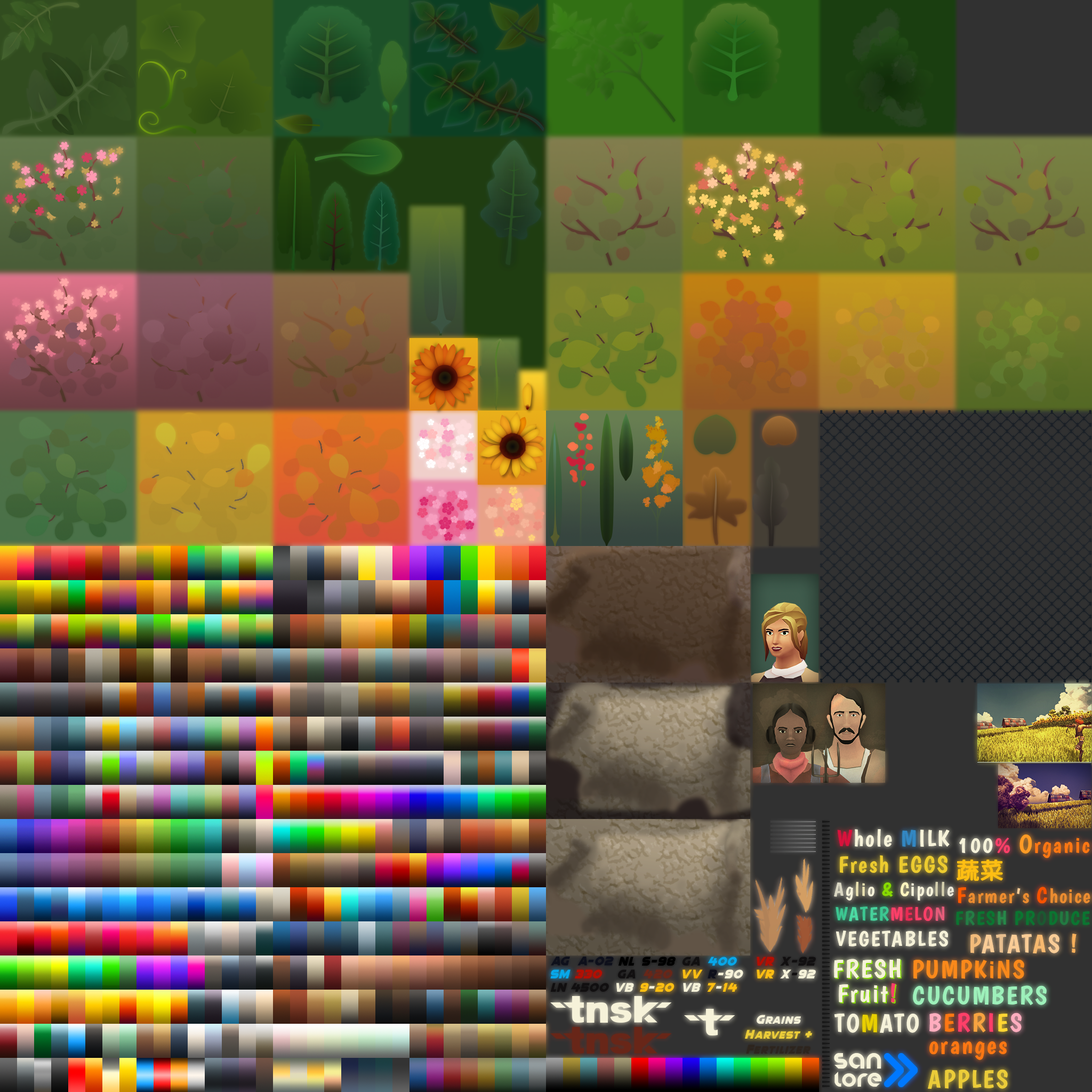
<style>
.page{position:relative;width:1092px;height:1092px}
.page>*{position:absolute;margin:0}
.t1{font:23.5px "Boogaloo-Regular";letter-spacing:0.075em;color:#f6f2d9}
.t2{font:23.5px "Boogaloo-Regular";letter-spacing:0.075em;color:#d9123c}
.t3{font:23.5px "Boogaloo-Regular";letter-spacing:0.075em;color:#3387c2}
.t4{font:22.4px "Boogaloo-Regular";letter-spacing:0.075em;color:#fe7713}
.t5{font:22.4px "Boogaloo-Regular";letter-spacing:0.075em;color:#f6f2d9}
.t6{font:22.4px "Boogaloo-Regular";letter-spacing:0.075em;color:#ff3f68}
.t7{font:25.6px "Boogaloo-Regular";letter-spacing:0.075em;color:#ff9b25}
.t8{font:23.5px "Boogaloo-Regular";letter-spacing:0.075em;color:#eccb2f}
.t9{font:22.4px "KozGoPr6N-Regular";letter-spacing:0.075em;color:#febe13}
.t10{font:19.2px "Boogaloo-Regular";letter-spacing:0.075em;color:#f6f2d9}
.t11{font:19.2px "Boogaloo-Regular";letter-spacing:0.075em;color:#d9d6c2}
.t12{font:19.2px "Boogaloo-Regular";letter-spacing:0.075em;color:#e9e1b1}
.t13{font:19.2px "Boogaloo-Regular";letter-spacing:0.075em;color:#87db00}
.t14{font:19.2px "Boogaloo-Regular";letter-spacing:0.075em;color:#fef5bf}
.t15{font:19.2px "Boogaloo-Regular";letter-spacing:0.075em;color:#d4cfae}
.t16{font:19.2px "Boogaloo-Regular";letter-spacing:0.075em;color:#ece9d8}
.t17{font:20.3px "Boogaloo-Regular";letter-spacing:0.075em;color:#eb8c30}
.t18{font:22.4px "Boogaloo-Regular";letter-spacing:0.075em;color:#ff5a00}
.t19{font:20.3px "Boogaloo-Regular";letter-spacing:0.075em;color:#f9cc96}
.t20{font:22.4px "Boogaloo-Regular";letter-spacing:0.075em;color:#f85201}
.t21{font:19.2px "Boogaloo-Regular";letter-spacing:0.075em;color:#ff3f68}
.t22{font:19.2px "Boogaloo-Regular";letter-spacing:0.075em;color:#3cc791}
.t23{font:19.2px "Boogaloo-Regular";letter-spacing:0.075em;color:#4cdaa3}
.t24{font:19.2px "Boogaloo-Regular";letter-spacing:0.075em;color:#46d19b}
.t25{font:19.2px "Boogaloo-Regular";letter-spacing:0.075em;color:#e82b53}
.t26{font:19.2px "Boogaloo-Regular";letter-spacing:0.075em;color:#e55c7a}
.t27{font:19.2px "Boogaloo-Regular";letter-spacing:0.075em;color:#0b7531}
.t28{font:19.2px "Boogaloo-Regular";letter-spacing:0.075em;color:#247d44}
.t29{font:19.2px "Boogaloo-Regular";letter-spacing:0.075em;color:#278849}
.t30{font:19.2px "Boogaloo-Regular";letter-spacing:0.075em;color:#1b5831}
.t31{font:19.2px "Boogaloo-Regular";letter-spacing:0.075em;color:#227a41}
.t32{font:21.3px "Boogaloo-Regular";letter-spacing:0.075em;color:#f6f2d9}
.t33{font:25.6px "Boogaloo-Regular";letter-spacing:0.075em;color:#f9cc96}
.t34{font:25.6px "Boogaloo-Regular";letter-spacing:0.075em;color:#f2bb7a}
.t35{font:25.6px "Boogaloo-Regular";letter-spacing:0.075em;color:#e7be8e}
.t36{font:25.6px "Boogaloo-Regular";letter-spacing:0.075em;color:#f7b96f}
.t37{font:25.6px "Boogaloo-Regular";letter-spacing:0.075em;color:#f7af5a}
.t38{font:12.8px "Quicksilver-Italic";letter-spacing:0.075em;color:#000000}
.t39{font:12.8px "Quicksilver-Italic";letter-spacing:0.075em;color:#110f10}
.t40{font:12.8px "Quicksilver-Italic";letter-spacing:0.075em;color:#b30f03}
.t41{font:25.6px "Boogaloo-Regular";letter-spacing:0.075em;color:#f6f2d9}
.t42{font:25.6px "Boogaloo-Regular";letter-spacing:0.075em}
.t43{font:25.6px "Boogaloo-Regular";letter-spacing:0.075em;color:#fa891b}
.t44{font:12.8px "Quicksilver-Italic";letter-spacing:0.075em;color:#f6f2d9}
.t45{font:12.8px "Quicksilver-Italic";letter-spacing:0.075em;color:#febe13}
.t46{font:12.8px "Quicksilver-Italic";letter-spacing:0.075em;color:#0e101b}
.t47{font:25.6px "Boogaloo-Regular";letter-spacing:0.075em;color:#ff3f68}
.t48{font:25.6px "Boogaloo-Regular";letter-spacing:0.075em;color:#9df0ba}
.t49{font:25.6px "Boogaloo-Regular";letter-spacing:0.075em;color:#e8cf00}
.t50{font:25.6px "Boogaloo-Regular";letter-spacing:0.075em;color:#ffadbe}
.t51{font:25.6px "Boogaloo-Regular";letter-spacing:0.075em;color:#fe7713}
.t52{font:25.6px "Boogaloo-Regular";letter-spacing:0.075em;color:#f7a340}
.t53{font:25.6px "Boogaloo-Regular";letter-spacing:0.075em;color:#ffd633}
.t54{font:10.7px "Quicksilver-Italic";letter-spacing:0.075em;color:#f6f2d9}
.t55{font:10.7px "Quicksilver-Italic";letter-spacing:0.075em;color:#ebcc39}
.t56{font:12.8px "Quicksilver-Italic";letter-spacing:0.075em;color:#ebcc39}
.t57{font:10.7px "Quicksilver-Italic";letter-spacing:0.075em;color:#2d251e}
.t58{font:12.8px "Quicksilver-Italic";letter-spacing:0.075em;color:#2d251e}
.t59{font:19.2px "Stereofunk";letter-spacing:0.075em;color:#f6f2d9}
.t60{font:17.1px "Stereofunk";letter-spacing:0.075em;color:#f6f2d9}
.t61{font:25.6px "Boogaloo-Regular";letter-spacing:0.075em;color:#ebcc39}
</style>
<div class="page">
<p class="t1" style="left:837px;top:829px;width:113px;height:18px"><span class="t2">W</span>hole <span class="t3">M</span>ILK</p>
<p class="t4" style="left:959px;top:834px;width:131px;height:24px"><span class="t5">100</span><span class="t6">% </span><span class="t7">O</span>rganic</p>
<p class="t8" style="left:840px;top:855px;width:107px;height:18px">Fresh EGGS</p>
<p class="t9" style="left:957px;top:860px;width:45px;height:21px">蔬菜</p>
<p class="t10" style="left:834px;top:881px;width:120px;height:20px"><span class="t11">A</span>g<span class="t12">li</span>o <span class="t13">&amp; </span><span class="t14">C</span>ipo<span class="t15">ll</span><span class="t16">e</span></p>
<p class="t17" style="left:958px;top:887px;width:132px;height:17px"><span class="t18">F</span>armer<span class="t19">’</span>s <span class="t20">C</span>hoice</p>
<p class="t21" style="left:836px;top:906px;width:108px;height:15px"><span class="t22">W</span><span class="t23">A</span><span class="t22">T</span><span class="t24">E</span><span class="t22">R</span>M<span class="t25">E</span>LO<span class="t26">N</span></p>
<p class="t27" style="left:956px;top:910px;width:134px;height:16px">F<span class="t28">R</span>ES<span class="t29">H</span> PR<span class="t30">O</span>D<span class="t31">U</span>CE</p>
<p class="t32" style="left:836px;top:930px;width:112px;height:17px">VEGETABLES</p>
<p class="t33" style="left:970px;top:934px;width:107px;height:20px"><span class="t34">P</span>A<span class="t35">T</span>AT<span class="t36">A</span>S <span class="t37">!</span></p>
<p class="t38" style="left:619px;top:957px;width:57px;height:9px">NL S-98</p>
<p class="t39" style="left:757px;top:957px;width:59px;height:9px"><span class="t40">VR </span>X-92</p>
<p class="t41" style="left:834px;top:959px;width:67px;height:19px">FRESH</p>
<p class="t41" style="left:834px;top:959px;width:67px;height:20px">FRESH</p>
<p class="t42" style="left:835px;top:960px;width:67px;height:19px">FRESH</p>
<p class="t43" style="left:913px;top:959px;width:111px;height:20px">PUMPKiNS</p>
<p class="t44" style="left:682px;top:969px;width:61px;height:9px"><span class="t45">VV </span><span class="t46">R</span>-90</p>
<p class="t45" style="left:757px;top:969px;width:59px;height:9px">VR <span class="t44">X</span><span class="t39">-</span><span class="t44">92</span></p>
<p class="t44" style="left:616px;top:983px;width:58px;height:9px">VB <span class="t45">9</span>-<span class="t45">20</span></p>
<p class="t44" style="left:683px;top:983px;width:54px;height:9px">VB <span class="t45">7</span>-<span class="t45">14</span></p>
<p class="t41" style="left:839px;top:983px;width:57px;height:19px">Fruit<span class="t47">!</span></p>
<p class="t41" style="left:839px;top:984px;width:57px;height:19px">Fruit!</p>
<p class="t42" style="left:840px;top:984px;width:57px;height:19px">Fruit!</p>
<p class="t48" style="left:913px;top:985px;width:134px;height:20px">CUCUMBERS</p>
<p class="t41" style="left:834px;top:1013px;width:85px;height:20px">TO<span class="t49">M</span>ATO</p>
<p class="t50" style="left:929px;top:1013px;width:93px;height:19px">B<span class="t51">E</span><span class="t47">R</span><span class="t52">R</span><span class="t47">I</span><span class="t53">E</span>S</p>
<p class="t54" style="left:757px;top:1015px;width:44px;height:9px"><span class="t44">G</span>rains</p>
<p class="t55" style="left:745px;top:1030px;width:68px;height:9px"><span class="t56">H</span>ARVEST <span class="t56">+</span></p>
<p class="t57" style="left:746px;top:1045px;width:64px;height:9px"><span class="t58">F</span>ertilizer</p>
<p class="t51" style="left:929px;top:1041px;width:78px;height:19px">oranges</p>
<p class="t59" style="left:834px;top:1053px;width:47px;height:16px">San</p>
<p class="t60" style="left:834px;top:1072px;width:47px;height:15px">Lore</p>
<p class="t61" style="left:928px;top:1069px;width:80px;height:20px">APPLES</p>
</div>
